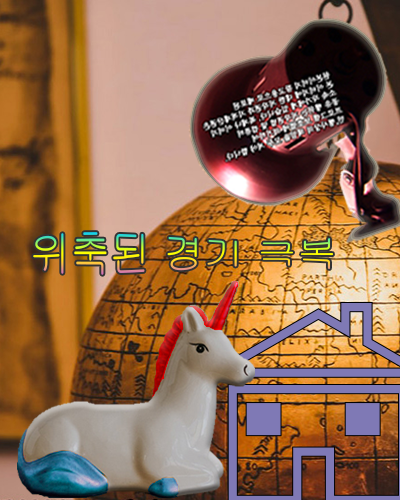
<style>
.page{position:relative;width:400px;height:500px}
.page>*{position:absolute;margin:0}
.t1{font:40px "Gulim"}
</style>
<div class="page">
<p class="t1" style="left:33px;top:232px;width:300px;height:43px">위축된 경기 극복</p>
</div>
